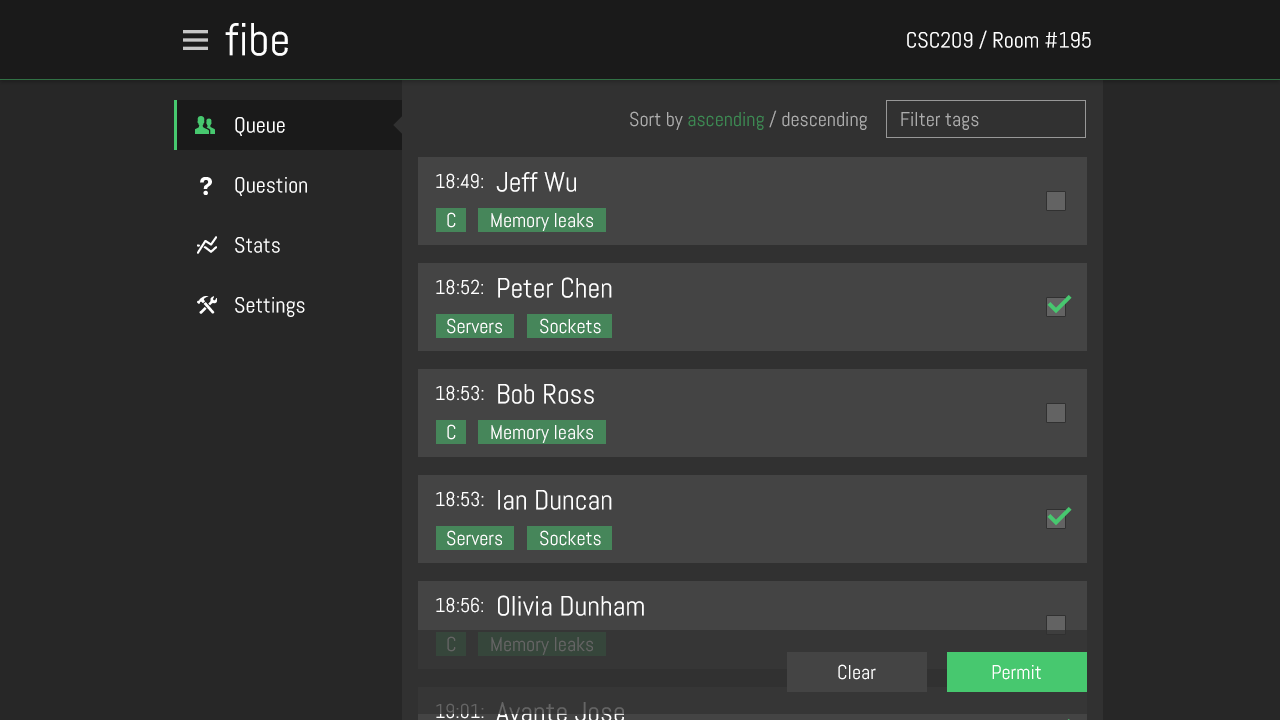
<style>
.page{position:relative;width:1280px;height:720px;background:#272727}
.page>*{position:absolute;margin:0}
.t1{font:46px "Abel-Regular";color:#ffffff}
.t2{font:22px "Abel-Regular";color:#ffffff}
.t3{font:20px "Abel-Regular"}
.t4{font:20px "Abel-Regular";color:#adadad}
.t5{font:20px "Abel-Regular";color:#ffffff}
.t6{font:28px "Abel-Regular";color:#ffffff}
.t7{font:20px "Abel-Regular";color:#656565}
.t8{font:28px "Abel-Regular"}
</style>
<div class="page">
<p class="t1" style="left:225px;top:23px;width:63px;height:33px">fibe</p>
<p class="t2" style="left:907px;top:30px;width:184px;height:19px">CSC209 / Room #195</p>
<p class="t3" style="left:630px;top:110px;width:237px;height:20px">Sort by ascending / descending</p>
<p class="t4" style="left:901px;top:112px;width:78px;height:18px">Filter tags</p>
<p class="t2" style="left:235px;top:117px;width:50px;height:19px">Queue</p>
<p class="t5" style="left:436px;top:173px;width:47px;height:16px">18:49:</p>
<p class="t6" style="left:496px;top:172px;width:80px;height:20px">Jeff Wu</p>
<p class="t2" style="left:235px;top:177px;width:72px;height:19px">Question</p>
<p class="t5" style="left:447px;top:212px;width:9px;height:16px">C</p>
<p class="t5" style="left:491px;top:213px;width:102px;height:18px">Memory leaks</p>
<p class="t2" style="left:235px;top:237px;width:45px;height:16px">Stats</p>
<p class="t5" style="left:436px;top:279px;width:47px;height:16px">18:52:</p>
<p class="t6" style="left:498px;top:277px;width:114px;height:21px">Peter Chen</p>
<p class="t2" style="left:235px;top:297px;width:70px;height:20px">Settings</p>
<p class="t5" style="left:447px;top:318px;width:55px;height:16px">Servers</p>
<p class="t5" style="left:540px;top:318px;width:61px;height:16px">Sockets</p>
<p class="t5" style="left:436px;top:385px;width:48px;height:16px">18:53:</p>
<p class="t6" style="left:498px;top:384px;width:96px;height:20px">Bob Ross</p>
<p class="t5" style="left:447px;top:424px;width:9px;height:16px">C</p>
<p class="t5" style="left:491px;top:425px;width:102px;height:18px">Memory leaks</p>
<p class="t5" style="left:436px;top:491px;width:48px;height:16px">18:53:</p>
<p class="t6" style="left:498px;top:490px;width:114px;height:20px">Ian Duncan</p>
<p class="t5" style="left:447px;top:530px;width:55px;height:16px">Servers</p>
<p class="t5" style="left:540px;top:530px;width:61px;height:16px">Sockets</p>
<p class="t5" style="left:436px;top:597px;width:47px;height:16px">18:56:</p>
<p class="t6" style="left:498px;top:595px;width:146px;height:21px">Olivia Dunham</p>
<p class="t7" style="left:447px;top:636px;width:9px;height:16px">C</p>
<p class="t7" style="left:491px;top:637px;width:102px;height:18px">Memory leaks</p>
<p class="t5" style="left:838px;top:664px;width:38px;height:16px">Clear</p>
<p class="t5" style="left:992px;top:665px;width:49px;height:15px">Permit</p>
<p class="t8" style="left:496px;top:702px;width:128px;height:20px">Avante Jose</p>
<p class="t3" style="left:436px;top:703px;width:48px;height:16px">19:01:</p>
</div>
